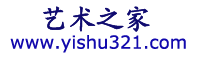
<style>
.page{position:relative;width:200px;height:60px;background:#ffffff}
.page>*{position:absolute;margin:0}
.t1{font:27px "KaiTi_GB2312";color:#0f0a6f;font-weight:bold}
.t2{font:18px "Verdana";color:#1209ad}
</style>
<div class="page">
<p class="t1" style="left:43px;top:6px;width:107px;height:26px">艺术之家</p>
<p class="t2" style="left:10px;top:35px;width:176px;height:18px">www.yishu321.com</p>
</div>
